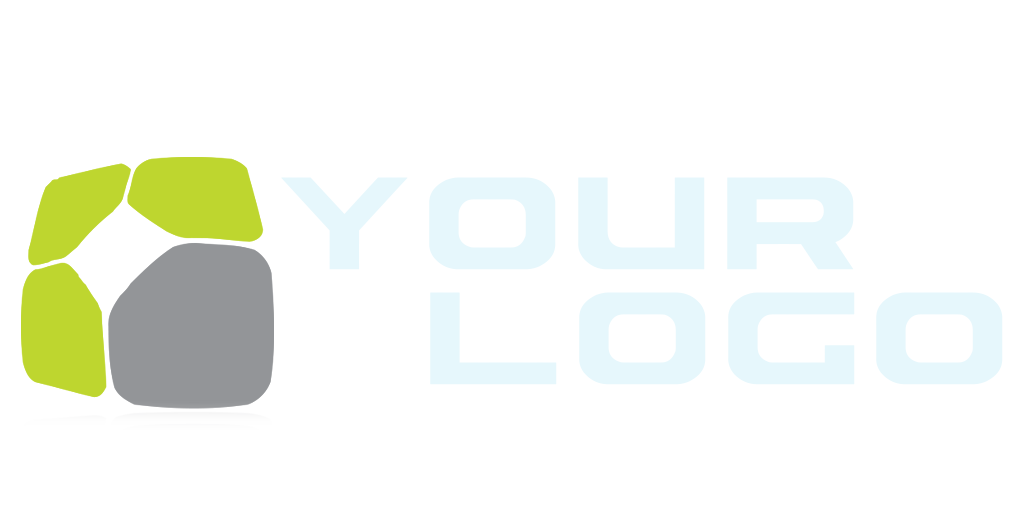
<style>
.page{position:relative;width:1024px;height:512px;background:#ffffff}
.page>*{position:absolute;margin:0}
.t1{font:175px/115.5px "ASTERA";letter-spacing:0.08em;color:#e6f7fc}
</style>
<div class="page">
<p class="t1" style="left:281px;top:177px;width:722px;height:208px;text-align:center">YOUR<br>   LOGO</p>
</div>
